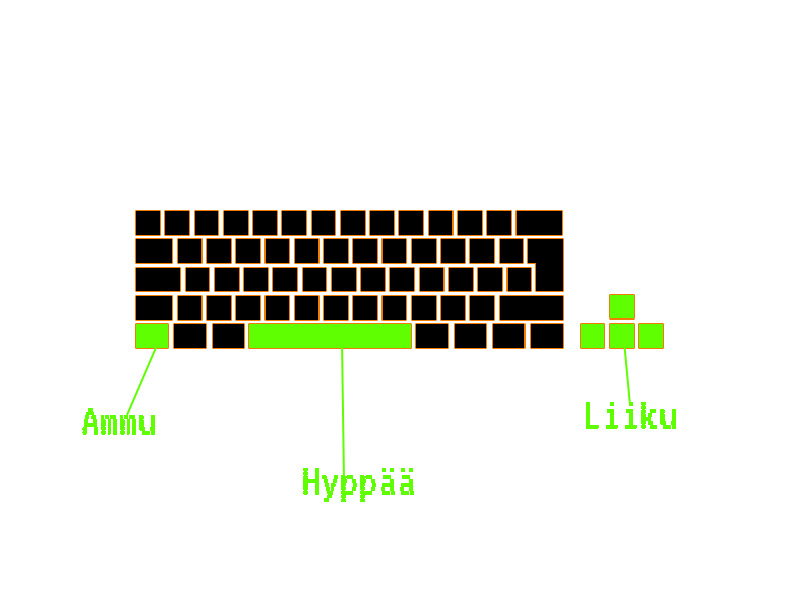
<style>
.page{position:relative;width:800px;height:600px;background:#ffffff}
.page>*{position:absolute;margin:0}
.t1{font:45.8px "VT323-Regular";color:#5fff02}
</style>
<div class="page">
<p class="t1" style="left:82px;top:408px;width:73px;height:27px">Ammu</p>
<p class="t1" style="left:586px;top:402px;width:90px;height:27px">Liiku</p>
<p class="t1" style="left:303px;top:468px;width:111px;height:34px">Hyppää</p>
</div>
